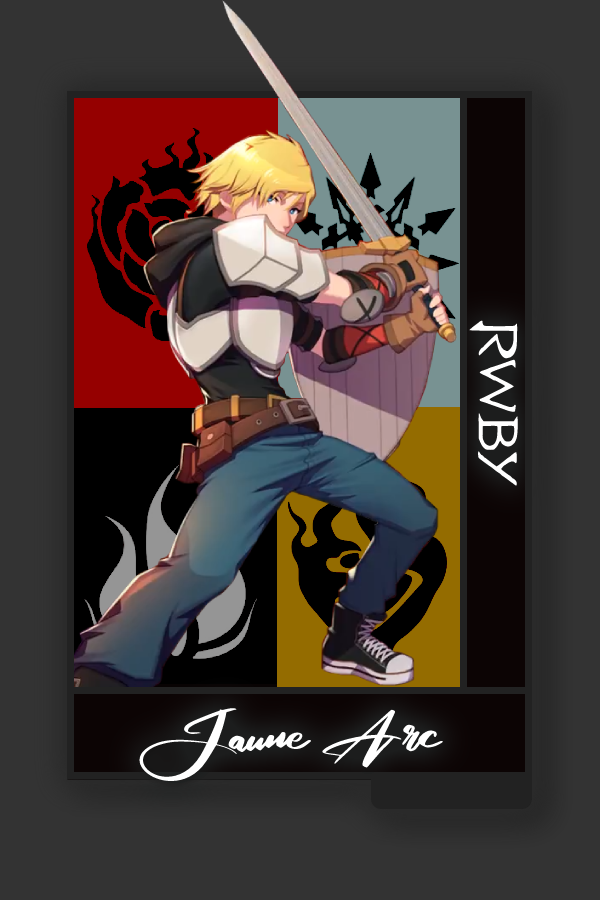
<style>
.page{position:relative;width:600px;height:900px;background:#333333}
.page>*{position:absolute;margin:0}
.t1{font:61.3px "RWBY_Style";color:#ffffff;scale:1.25 1}
.t2{font:75px "RosegaFREE";color:#ffffff}
</style>
<div class="page">
<p class="t1" style="left:469px;top:320px;width:49px;height:166px;rotate:90deg">RWBY</p>
<p class="t2" style="left:106px;top:707px;width:338px;height:101px">Jaune Arc</p>
</div>
